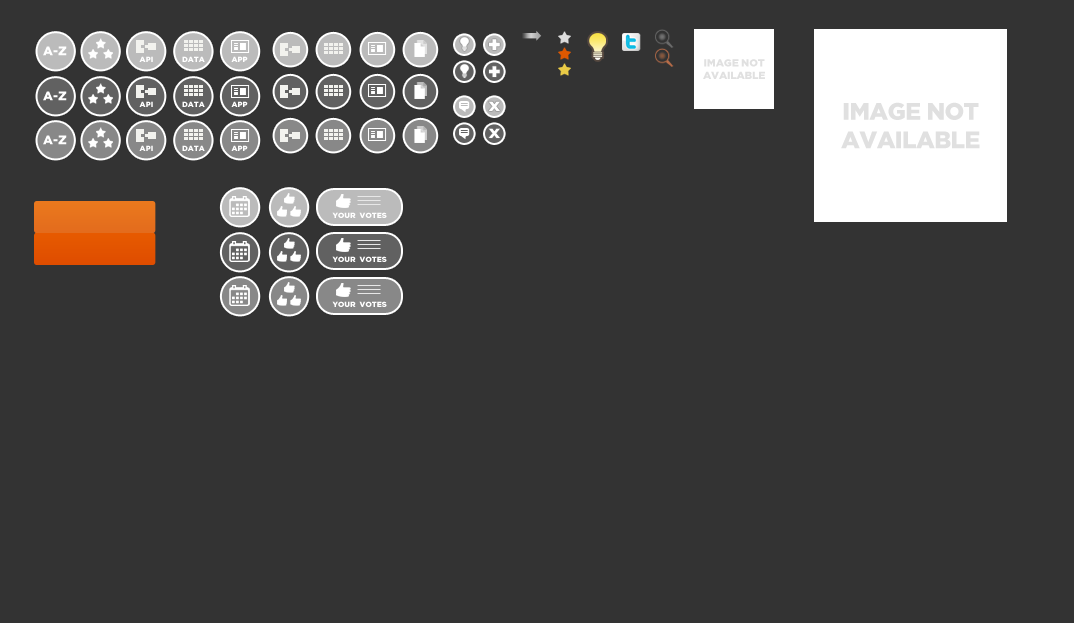
<style>
.page{position:relative;width:1074px;height:623px;background:#333333}
.page>*{position:absolute;margin:0}
.t1{font:21px "GothamBlack";color:#ffffff}
.t2{font:12.5px "GothamBlack";color:#ffffff}
.t3{font:7.6px "GothamBlack";color:#ffffff}
.t4{font:10.6px "GothamBlack";letter-spacing:-0.025em;color:#e0e0e0;text-transform:uppercase}
.t5{font:13.2px "GothamBlack";color:#ffffff;scale:1.21 1}
.t6{font:23.7px "GothamBlack";letter-spacing:-0.025em;color:#e0e0e0;text-transform:uppercase}
</style>
<div class="page">
<p class="t1" style="left:489px;top:39px;width:11px;height:11px">+</p>
<p class="t2" style="left:43px;top:46px;width:24px;height:10px">A-Z</p>
<p class="t3" style="left:139px;top:56px;width:14px;height:6px">API</p>
<p class="t3" style="left:182px;top:56px;width:23px;height:6px">DATA</p>
<p class="t3" style="left:231px;top:56px;width:17px;height:6px">APP</p>
<p class="t4" style="left:703px;top:59px;width:62px;height:20px;text-align:center">IMAGE NOT<br>AvAILABLE</p>
<p class="t1" style="left:489px;top:66px;width:11px;height:11px">+</p>
<p class="t2" style="left:43px;top:91px;width:24px;height:10px">A-Z</p>
<p class="t3" style="left:139px;top:101px;width:14px;height:6px">API</p>
<p class="t3" style="left:182px;top:101px;width:23px;height:6px">DATA</p>
<p class="t3" style="left:231px;top:101px;width:17px;height:6px">APP</p>
<p class="t5" style="left:488px;top:101px;width:12px;height:10px">X</p>
<p class="t6" style="left:841px;top:102px;width:139px;height:47px;text-align:center">IMAGE NOT<br>AvAILABLE</p>
<p class="t2" style="left:43px;top:135px;width:24px;height:10px">A-Z</p>
<p class="t5" style="left:488px;top:128px;width:12px;height:10px">X</p>
<p class="t3" style="left:139px;top:145px;width:14px;height:6px">API</p>
<p class="t3" style="left:182px;top:145px;width:23px;height:6px">DATA</p>
<p class="t3" style="left:231px;top:145px;width:17px;height:6px">APP</p>
<p class="t3" style="left:332px;top:212px;width:55px;height:6px">YOUR  VOTES</p>
<p class="t3" style="left:332px;top:256px;width:55px;height:6px">YOUR  VOTES</p>
<p class="t3" style="left:332px;top:301px;width:55px;height:6px">YOUR  VOTES</p>
</div>
